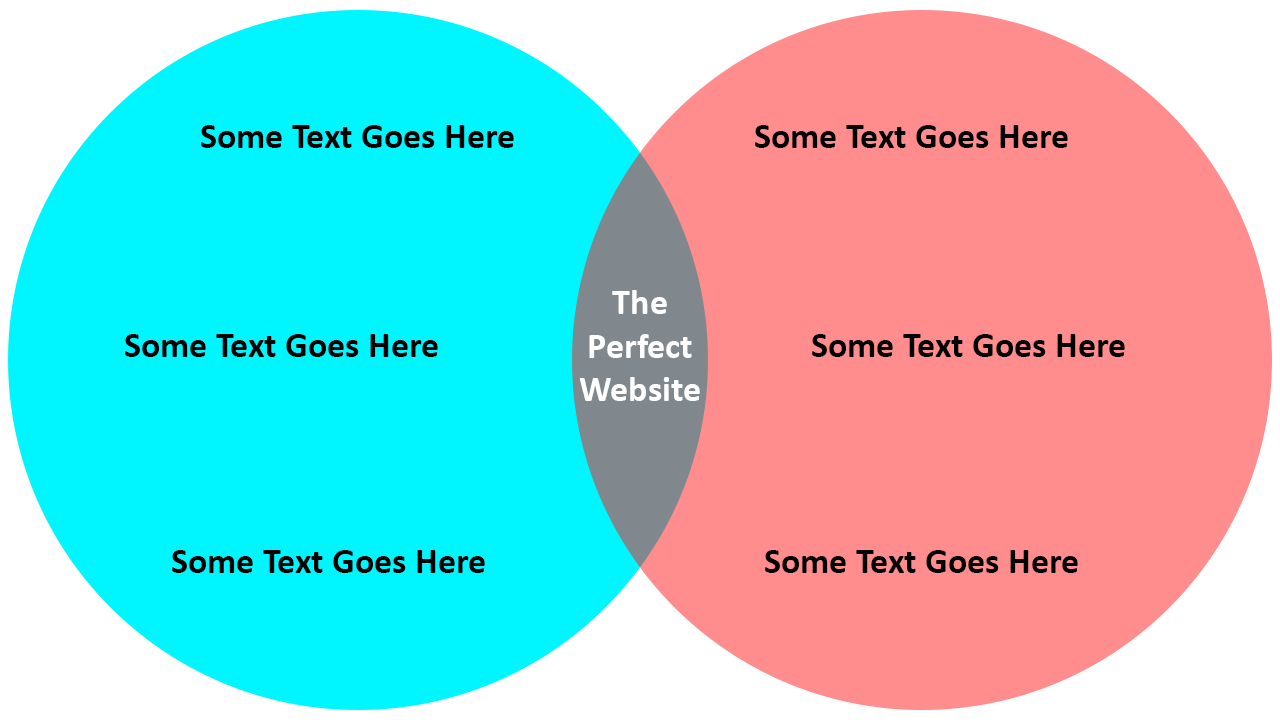
<style>
.page{position:relative;width:1280px;height:720px;background:#ff8d8d}
.page>*{position:absolute;margin:0}
.t1{font:36px "Calibri-Bold";color:#000000}
.t2{font:36px "Calibri-Bold";color:#ffffff}
</style>
<div class="page">
<p class="t1" style="left:201px;top:125px;width:313px;height:23px">Some Text Goes Here</p>
<p class="t1" style="left:755px;top:125px;width:313px;height:23px">Some Text Goes Here</p>
<p class="t2" style="left:579px;top:290px;width:121px;height:111px;text-align:center">The<br>Perfect<br>Website</p>
<p class="t1" style="left:125px;top:334px;width:313px;height:23px">Some Text Goes Here</p>
<p class="t1" style="left:812px;top:334px;width:313px;height:23px">Some Text Goes Here</p>
<p class="t1" style="left:172px;top:550px;width:313px;height:23px">Some Text Goes Here</p>
<p class="t1" style="left:765px;top:550px;width:313px;height:23px">Some Text Goes Here</p>
</div>
